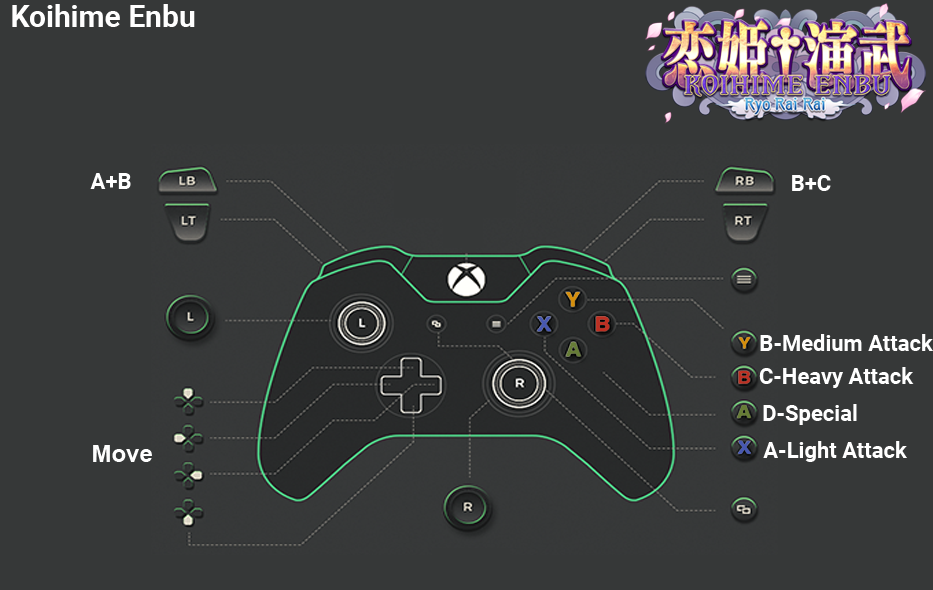
<style>
.page{position:relative;width:933px;height:590px;background:#363838}
.page>*{position:absolute;margin:0}
.t1{font:30px "Roboto-Bold";color:#ffffff}
.t2{font:22px "Roboto-Bold";color:#ffffff}
.t3{font:24px "Arial-BoldMT";color:#fefefe}
</style>
<div class="page">
<p class="t1" style="left:12px;top:4px;width:183px;height:23px">Koihime Enbu</p>
<p class="t2" style="left:90px;top:173px;width:41px;height:16px">A+B</p>
<p class="t2" style="left:792px;top:175px;width:39px;height:16px">B+C</p>
<p class="t2" style="left:760px;top:334px;width:173px;height:17px">B-Medium Attack</p>
<p class="t2" style="left:759px;top:367px;width:155px;height:21px">C-Heavy Attack</p>
<p class="t2" style="left:763px;top:404px;width:94px;height:21px">D-Special</p>
<p class="t3" style="left:93px;top:445px;width:59px;height:17px">Move</p>
<p class="t2" style="left:763px;top:441px;width:144px;height:21px">A-Light Attack</p>
</div>
